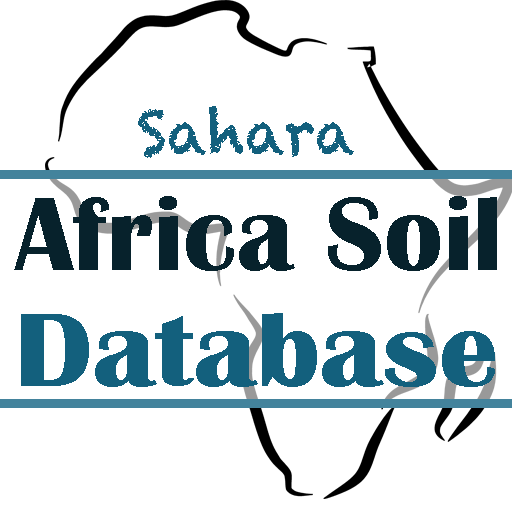
<style>
.page{position:relative;width:512px;height:512px;background:#ffffff}
.page>*{position:absolute;margin:0}
.t1{font:60px "Chalkduster";color:#13607d}
.t2{font:107.7px "BritannicBold";color:#07222c}
.t3{font:107.7px "BritannicBold";color:#13607d;scale:1.1 1}
</style>
<div class="page">
<p class="t1" style="left:138px;top:106px;width:216px;height:52px">Sahara</p>
<p class="t2" style="left:14px;top:196px;width:483px;height:75px">Africa Soil</p>
<p class="t3" style="left:21px;top:313px;width:474px;height:74px">Database</p>
</div>
